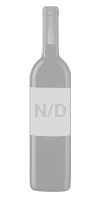
<style>
.page{position:relative;width:100px;height:200px;background:#ffffff}
.page>*{position:absolute;margin:0}
.t1{font:18px "HelveticaNeue-Bold";color:#c5c5c5}
</style>
<div class="page">
<p class="t1" style="left:35px;top:104px;width:31px;height:13px">N/D</p>
</div>
